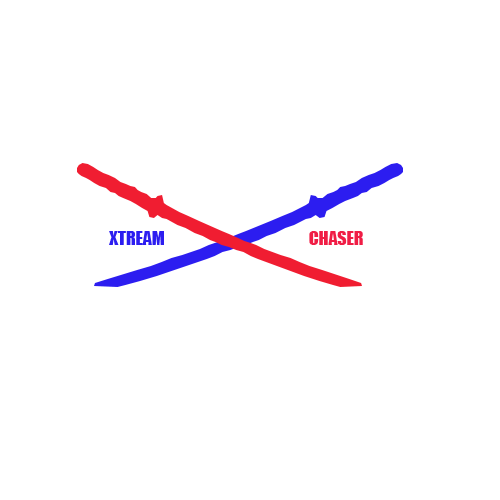
<style>
.page{position:relative;width:500px;height:500px;background:#ffffff}
.page>*{position:absolute;margin:0}
.t1{font:18px "Impact";color:#2c1df0}
.t2{font:18px "Impact";color:#f01d45}
</style>
<div class="page">
<p class="t1" style="left:109px;top:231px;width:55px;height:14px">XTREAM</p>
<p class="t2" style="left:309px;top:231px;width:54px;height:14px">CHASER</p>
</div>
